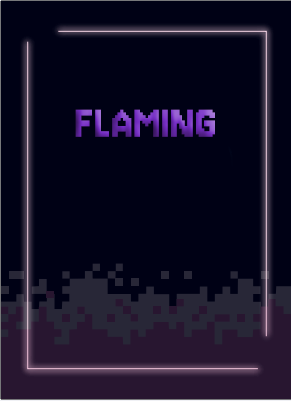
<style>
.page{position:relative;width:291px;height:401px;background:#000115}
.page>*{position:absolute;margin:0}
.t1{font:50px "Jersey10-Regular";letter-spacing:0.025em}
</style>
<div class="page">
<p class="t1" style="left:75px;top:109px;width:140px;height:28px">FLAMING</p>
</div>
